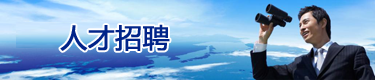
<style>
.page{position:relative;width:375px;height:80px}
.page>*{position:absolute;margin:0}
.t1{font:26.7px "MicrosoftYaHei";color:#012489;font-weight:bold}
</style>
<div class="page">
<p class="t1" style="left:60px;top:24px;width:110px;height:27px">人才招聘</p>
</div>
